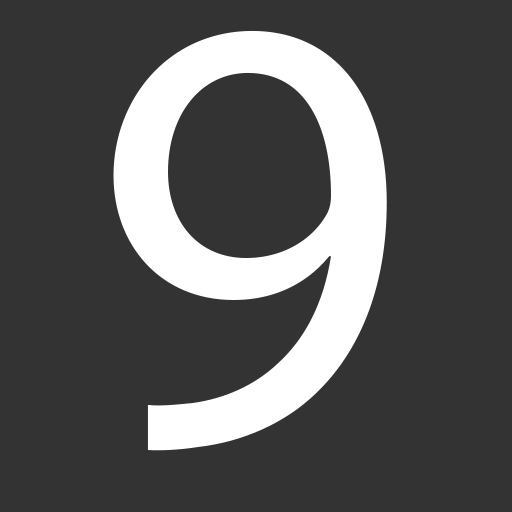
<style>
.page{position:relative;width:512px;height:512px;background:#333333}
.page>*{position:absolute;margin:0}
.t1{font:625px "MyriadPro-Regular";color:#ffffff}
</style>
<div class="page">
<p class="t1" style="left:113px;top:30px;width:274px;height:421px">9</p>
</div>
